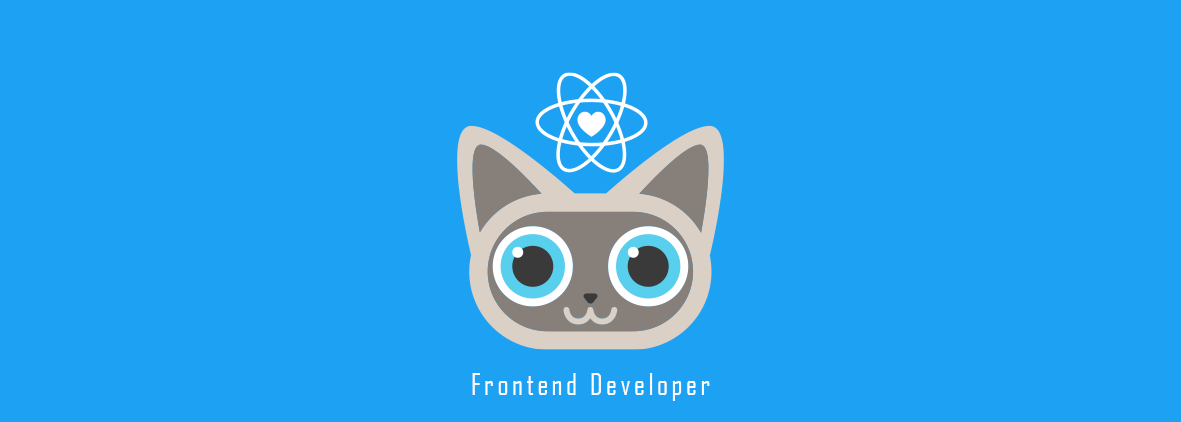
<style>
.page{position:relative;width:1181px;height:422px;background:#1da1f2}
.page>*{position:absolute;margin:0}
.t1{font:29.2px "AgencyFB-Reg";letter-spacing:0.12em;color:#ffffff}
</style>
<div class="page">
<p class="t1" style="left:472px;top:373px;width:238px;height:28px">Frontend Developer</p>
</div>
